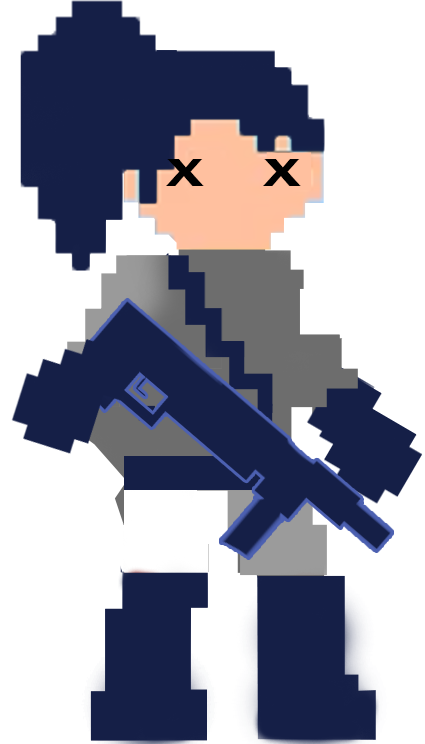
<style>
.page{position:relative;width:425px;height:744px;background:#ffffff}
.page>*{position:absolute;margin:0}
.t1{font:39.9px "FranklinGothic-Demi";color:#000000;scale:1.57 1}
</style>
<div class="page">
<p class="t1" style="left:166px;top:159px;width:38px;height:27px">X</p>
<p class="t1" style="left:263px;top:159px;width:38px;height:27px">X</p>
</div>
